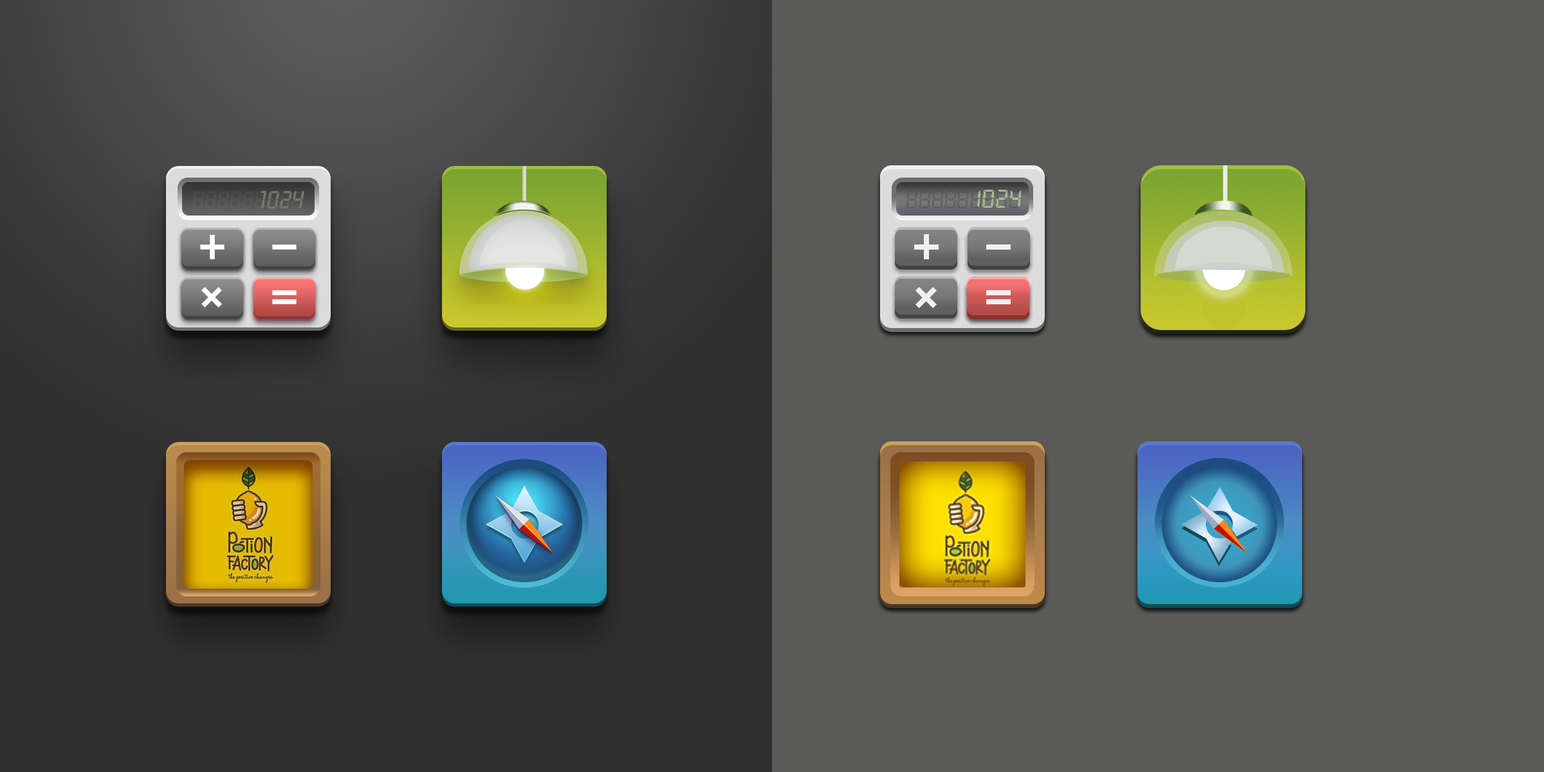
<style>
.page{position:relative;width:1544px;height:772px;background:#5a5a58}
.page>*{position:absolute;margin:0}
.t1{font:27.2px "YournameD7HomeHalf";color:#4f4f4f}
.t2{font:27.4px "YournameD7HomeHalf";color:#4f4f4f}
.t3{font:27.1px "YournameD7HomeHalf";color:#4f4f4f}
.t4{font:27.6px "YournameD7HomeHalf";color:#a7b693}
.t5{font:27.3px "YournameD7HomeHalf"}
</style>
<div class="page">
<p class="t1" style="left:906px;top:190px;width:12px;height:18px;opacity:0.5">8</p>
<p class="t1" style="left:919px;top:190px;width:12px;height:18px;opacity:0.5">8</p>
<p class="t2" style="left:932px;top:190px;width:12px;height:18px;opacity:0.5">8</p>
<p class="t2" style="left:945px;top:190px;width:12px;height:18px;opacity:0.5">8</p>
<p class="t3" style="left:957px;top:190px;width:12px;height:18px;opacity:0.5">8</p>
<p class="t3" style="left:970px;top:190px;width:13px;height:18px;opacity:0.5">8</p>
<p class="t4" style="left:977px;top:190px;width:44px;height:18px">1024</p>
<p class="t5" style="left:983px;top:190px;width:12px;height:18px">8</p>
</div>
